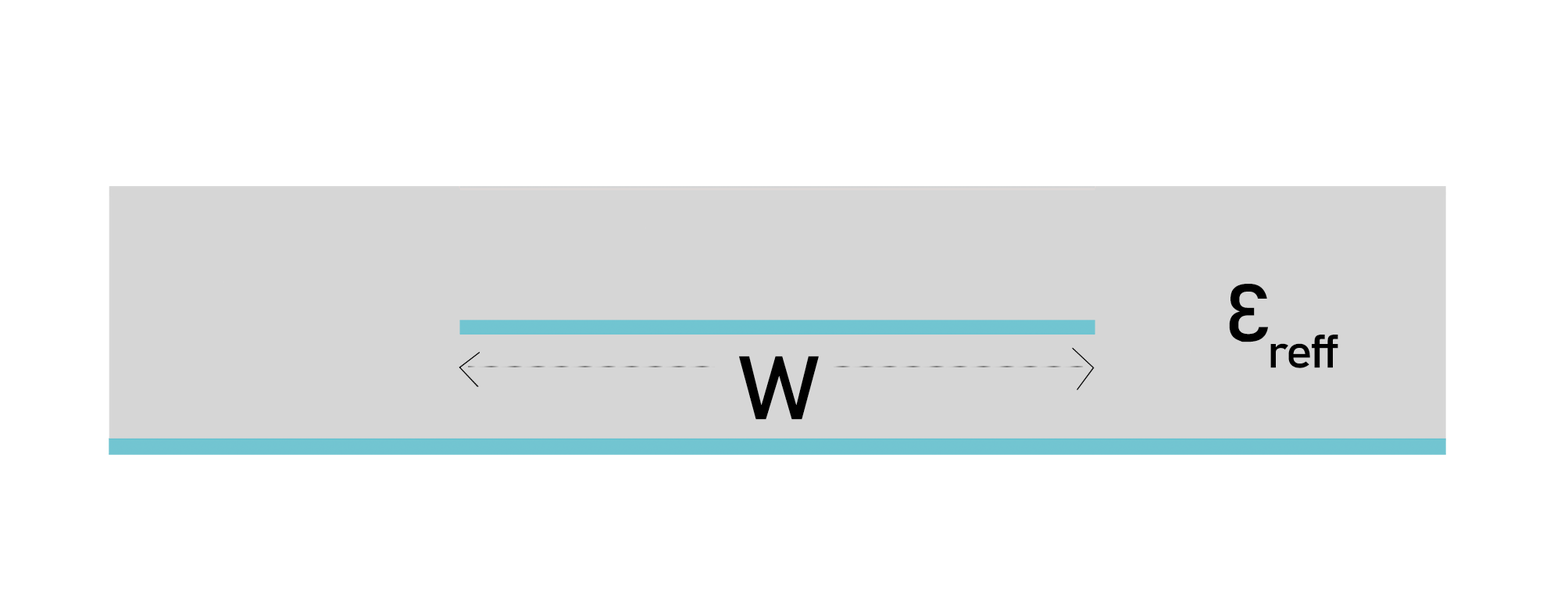
<style>
.page{position:relative;width:1568px;height:609px;background:#ffffff}
.page>*{position:absolute;margin:0}
.t1{font:79.8px "Bahnschrift";letter-spacing:-0.06em;color:#000000;font-weight:bold;font-style:italic;scale:1.1 1}
.t2{font:88.2px "Bahnschrift";letter-spacing:-0.06em;color:#000000;font-weight:bold;font-style:italic;scale:1.1 1}
</style>
<div class="page">
<p class="t1" style="left:1229px;top:284px;width:109px;height:84px">Ɛreff</p>
<p class="t2" style="left:739px;top:355px;width:80px;height:65px">W</p>
</div>
